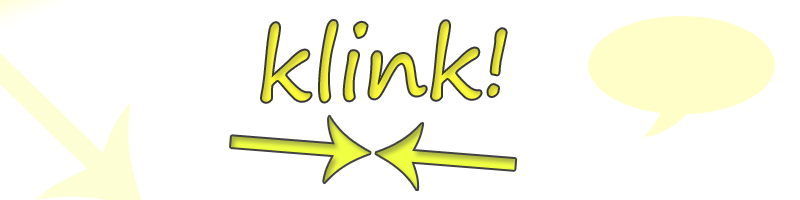
<style>
.page{position:relative;width:800px;height:200px;background:#ffffff}
.page>*{position:absolute;margin:0}
.t1{font:93px "SegoePrint";color:#e8e638}
</style>
<div class="page">
<p class="t1" style="left:262px;top:21px;width:244px;height:81px">klink!</p>
</div>
